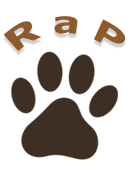
<style>
.page{position:relative;width:130px;height:175px;background:#ffffff}
.page>*{position:absolute;margin:0}
.t1{font:30px "Verdana-Bold";color:#8c5a2b}
</style>
<div class="page">
<p class="t1" style="left:3px;top:16px;width:123px;height:35px">R a P</p>
</div>
